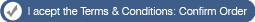
<style>
.page{position:relative;width:255px;height:22px;background:#3e5e89}
.page>*{position:absolute;margin:0}
.t1{font:11px "Swiss721BT-Light";color:#ffffff}
</style>
<div class="page">
<p class="t1" style="left:28px;top:7px;width:219px;height:10px">I acept the Terms &amp; Conditions: Confirm Order</p>
</div>
